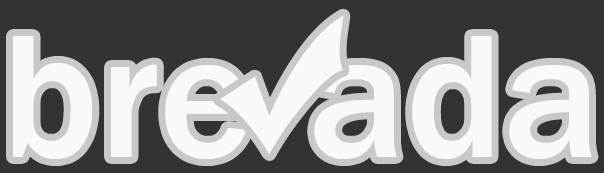
<style>
.page{position:relative;width:604px;height:173px;background:#333333}
.page>*{position:absolute;margin:0}
.t1{font:182px "FranklinGothic-Medium";color:#f9f9f9}
</style>
<div class="page">
<p class="t1" style="left:13px;top:36px;width:235px;height:123px">bre</p>
<p class="t1" style="left:314px;top:36px;width:278px;height:123px">ada</p>
</div>
